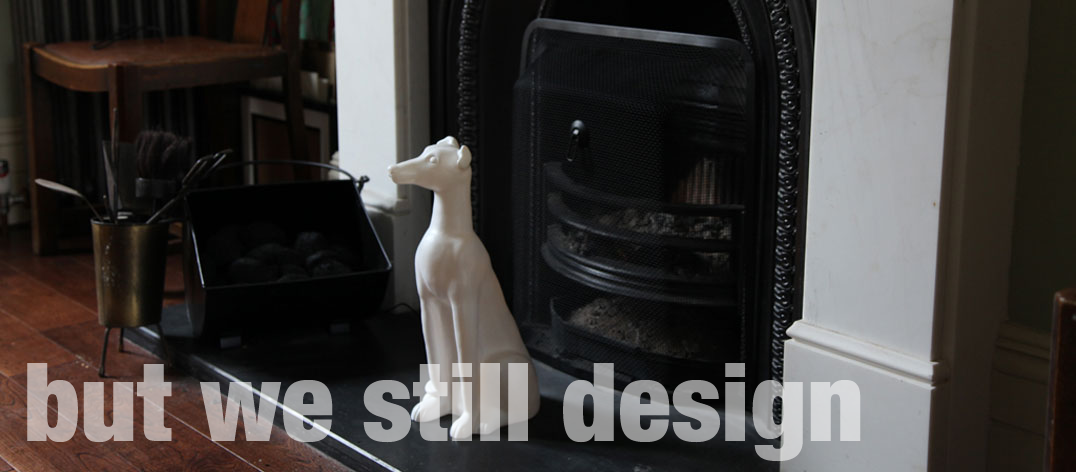
<style>
.page{position:relative;width:1076px;height:472px}
.page>*{position:absolute;margin:0}
.t1{font:109.6px "HelveticaNeue-CondensedBlack"}
</style>
<div class="page">
<p class="t1" style="left:27px;top:363px;width:834px;height:99px">but we still design</p>
</div>
